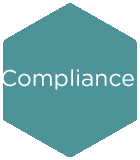
<style>
.page{position:relative;width:140px;height:160px;background:#4e9398}
.page>*{position:absolute;margin:0}
.t1{font:23px "GothamRounded-Book";color:#fbffff}
</style>
<div class="page">
<p class="t1" style="left:2px;top:69px;width:132px;height:21px">Compliance</p>
</div>
